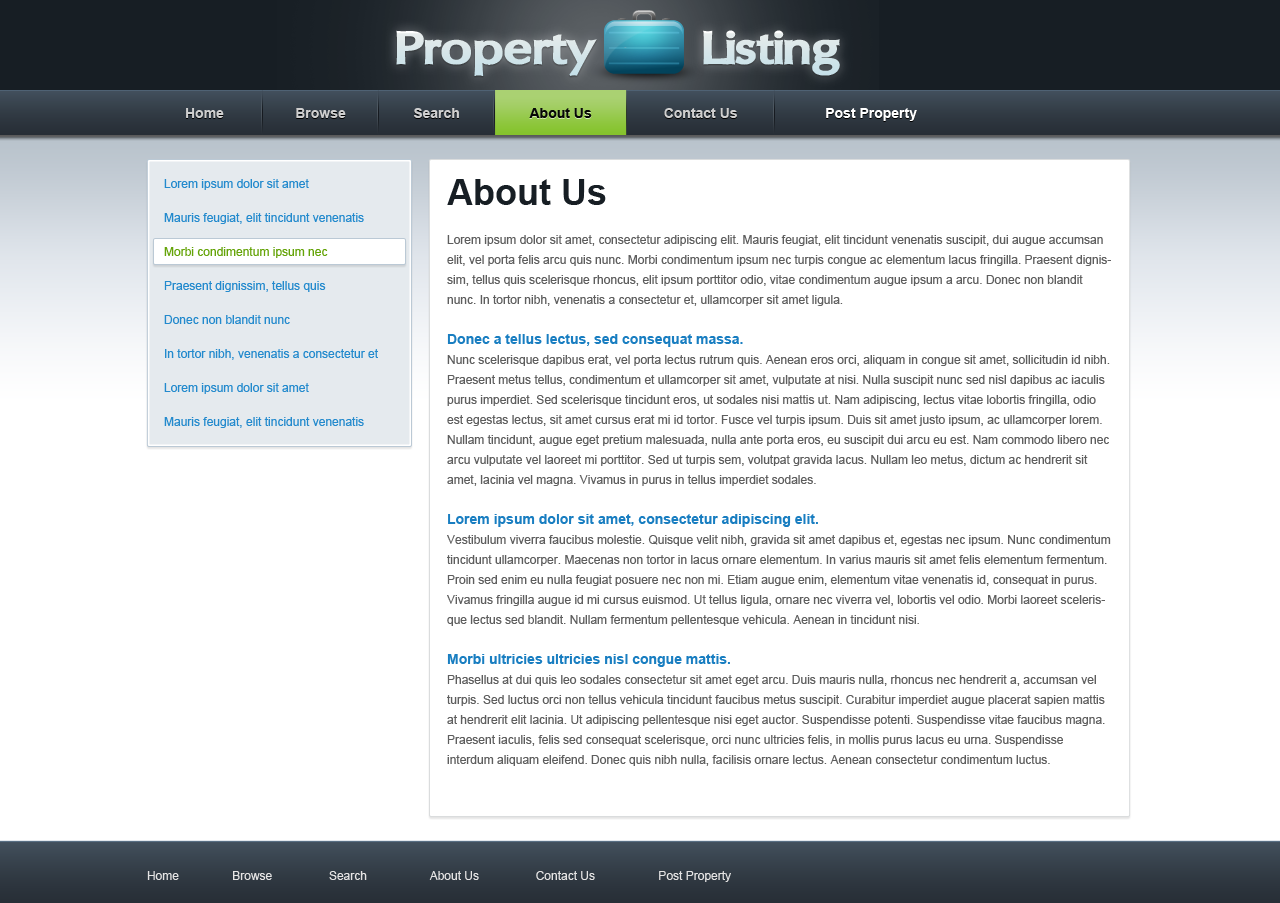
<style>
.page{position:relative;width:1280px;height:903px;background:#ffffff}
.page>*{position:absolute;margin:0}
.t1{font:48px "OregonLDOExtendedBlack";color:#d8e6ea}
.t2{font:14px "Arial-BoldMT";color:#cfcfcf}
.t3{font:14px "Arial-BoldMT";color:#070806}
.t4{font:14px "Arial-BoldMT";color:#ffffff}
.t5{font:12px/34px "ArialMT";color:#238acd}
.t6{font:12px/34px "ArialMT";color:#65a409}
.t7{font:36px "Arial-BoldMT";color:#171e24}
.t8{font:12px/20px "ArialMT";color:#5e5e5e}
.t9{font:14px/20px "Arial-BoldMT";color:#197ec1}
.t10{font:12px "ArialMT";color:#e5e4e4}
</style>
<div class="page">
<p class="t1" style="left:396px;top:30px;width:444px;height:46px">Property        Listing</p>
<p class="t2" style="left:186px;top:108px;width:38px;height:10px">Home</p>
<p class="t2" style="left:296px;top:108px;width:50px;height:10px">Browse</p>
<p class="t2" style="left:414px;top:108px;width:45px;height:10px">Search</p>
<p class="t3" style="left:529px;top:108px;width:63px;height:10px">About Us</p>
<p class="t2" style="left:664px;top:108px;width:73px;height:10px">Contact Us</p>
<p class="t4" style="left:826px;top:108px;width:91px;height:13px">Post Property</p>
<p class="t5" style="left:164px;top:179px;width:214px;height:249px">Lorem ipsum dolor sit amet<br>Mauris feugiat, elit tincidunt venenatis <br><span class="t6">Morbi condimentum ipsum nec</span> <br>Praesent dignissim, tellus quis<br>Donec non blandit nunc<br>In tortor nibh, venenatis a consectetur et<br>Lorem ipsum dolor sit amet<br>Mauris feugiat, elit tincidunt venenatis</p>
<p class="t7" style="left:447px;top:179px;width:159px;height:26px">About Us</p>
<p class="t8" style="left:447px;top:235px;width:664px;height:531px">Lorem ipsum dolor sit amet, consectetur adipiscing elit. Mauris feugiat, elit tincidunt venenatis suscipit, dui augue accumsan elit, vel porta felis arcu quis nunc. Morbi condimentum ipsum nec turpis congue ac elementum lacus fringilla. Praesent dignissim, tellus quis scelerisque rhoncus, elit ipsum porttitor odio, vitae condimentum augue ipsum a arcu. Donec non blandit nunc. In tortor nibh, venenatis a consectetur et, ullamcorper sit amet ligula. <br><br><span class="t9">Donec a tellus lectus, sed consequat massa. <br></span>Nunc scelerisque dapibus erat, vel porta lectus rutrum quis. Aenean eros orci, aliquam in congue sit amet, sollicitudin id nibh. Praesent metus tellus, condimentum et ullamcorper sit amet, vulputate at nisi. Nulla suscipit nunc sed nisl dapibus ac iaculis purus imperdiet. Sed scelerisque tincidunt eros, ut sodales nisi mattis ut. Nam adipiscing, lectus vitae lobortis fringilla, odio est egestas lectus, sit amet cursus erat mi id tortor. Fusce vel turpis ipsum. Duis sit amet justo ipsum, ac ullamcorper lorem. Nullam tincidunt, augue eget pretium malesuada, nulla ante porta eros, eu suscipit dui arcu eu est. Nam commodo libero nec arcu vulputate vel laoreet mi porttitor. Sed ut turpis sem, volutpat gravida lacus. Nullam leo metus, dictum ac hendrerit sit amet, lacinia vel magna. Vivamus in purus in tellus imperdiet sodales.<br><br><span class="t9">Lorem ipsum dolor sit amet, consectetur adipiscing elit. <br></span>Vestibulum viverra faucibus molestie. Quisque velit nibh, gravida sit amet dapibus et, egestas nec ipsum. Nunc condimentum tincidunt ullamcorper. Maecenas non tortor in lacus ornare elementum. In varius mauris sit amet felis elementum fermentum. Proin sed enim eu nulla feugiat posuere nec non mi. Etiam augue enim, elementum vitae venenatis id, consequat in purus. Vivamus fringilla augue id mi cursus euismod. Ut tellus ligula, ornare nec viverra vel, lobortis vel odio. Morbi laoreet scelerisque lectus sed blandit. Nullam fermentum pellentesque vehicula. Aenean in tincidunt nisi.<br><br><span class="t9">Morbi ultricies ultricies nisl congue mattis. <br></span>Phasellus at dui quis leo sodales consectetur sit amet eget arcu. Duis mauris nulla, rhoncus nec hendrerit a, accumsan vel turpis. Sed luctus orci non tellus vehicula tincidunt faucibus metus suscipit. Curabitur imperdiet augue placerat sapien mattis at hendrerit elit lacinia. Ut adipiscing pellentesque nisi eget auctor. Suspendisse potenti. Suspendisse vitae faucibus magna. Praesent iaculis, felis sed consequat scelerisque, orci nunc ultricies felis, in mollis purus lacus eu urna. Suspendisse interdum aliquam eleifend. Donec quis nibh nulla, facilisis ornare lectus. Aenean consectetur condimentum luctus.</p>
<p class="t10" style="left:147px;top:871px;width:584px;height:11px">Home                Browse                 Search                   About Us                 Contact Us                   Post Property</p>
</div>
